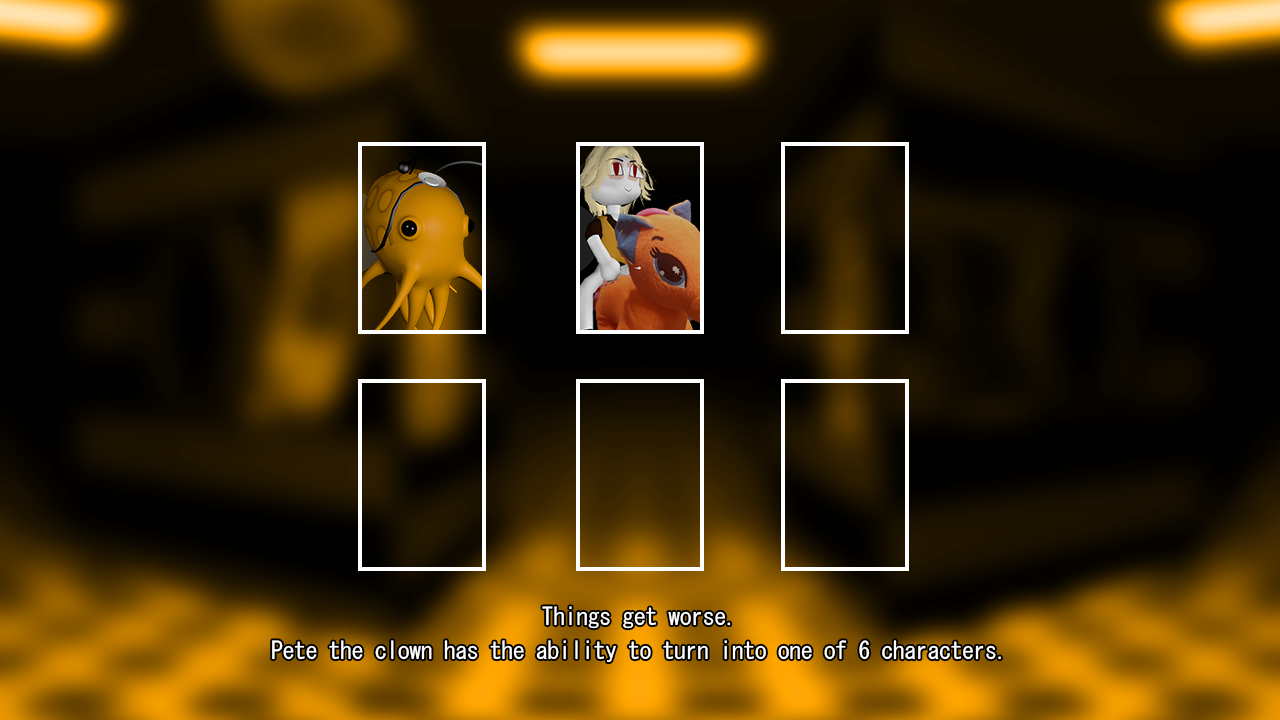
<style>
.page{position:relative;width:1280px;height:720px}
.page>*{position:absolute;margin:0}
.t1{font:24px/34.1px "MS-Gothic";letter-spacing:-0.02em;color:#ffffff}
</style>
<div class="page">
<p class="t1" style="left:272px;top:606px;width:729px;height:57px;text-align:center">Things get worse.<br>Pete the clown has the ability to turn into one of 6 characters.</p>
</div>
